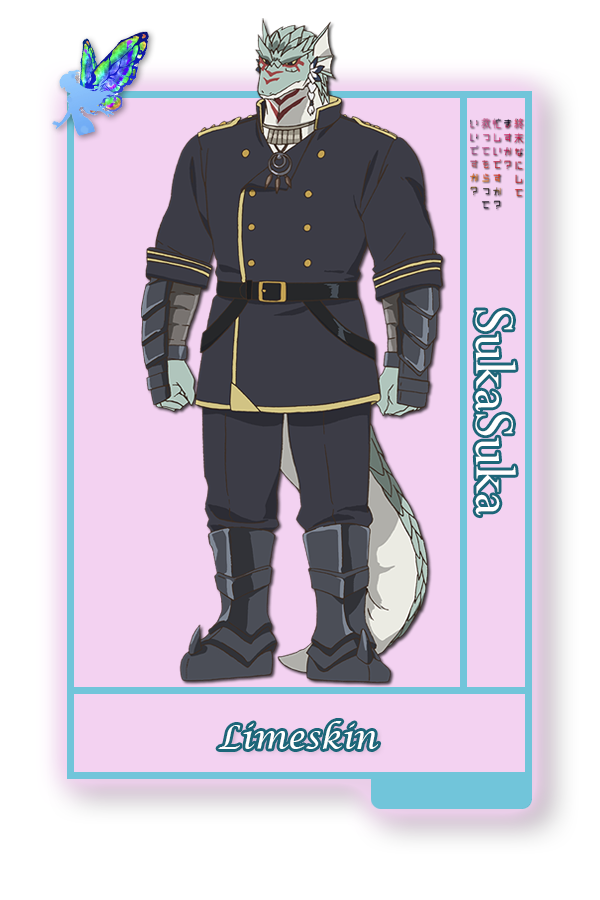
<style>
.page{position:relative;width:600px;height:900px;background:#f3d2f1}
.page>*{position:absolute;margin:0}
.t1{font:62.5px "Perpetua";color:#ffffff}
.t2{font:33.3px "LucidaCalligraphy-Italic";color:#ffffff}
</style>
<div class="page">
<p class="t1" style="left:475px;top:310px;width:41px;height:206px;rotate:90deg">SukaSuka</p>
<p class="t2" style="left:218px;top:721px;width:161px;height:28px">Limeskin</p>
</div>
